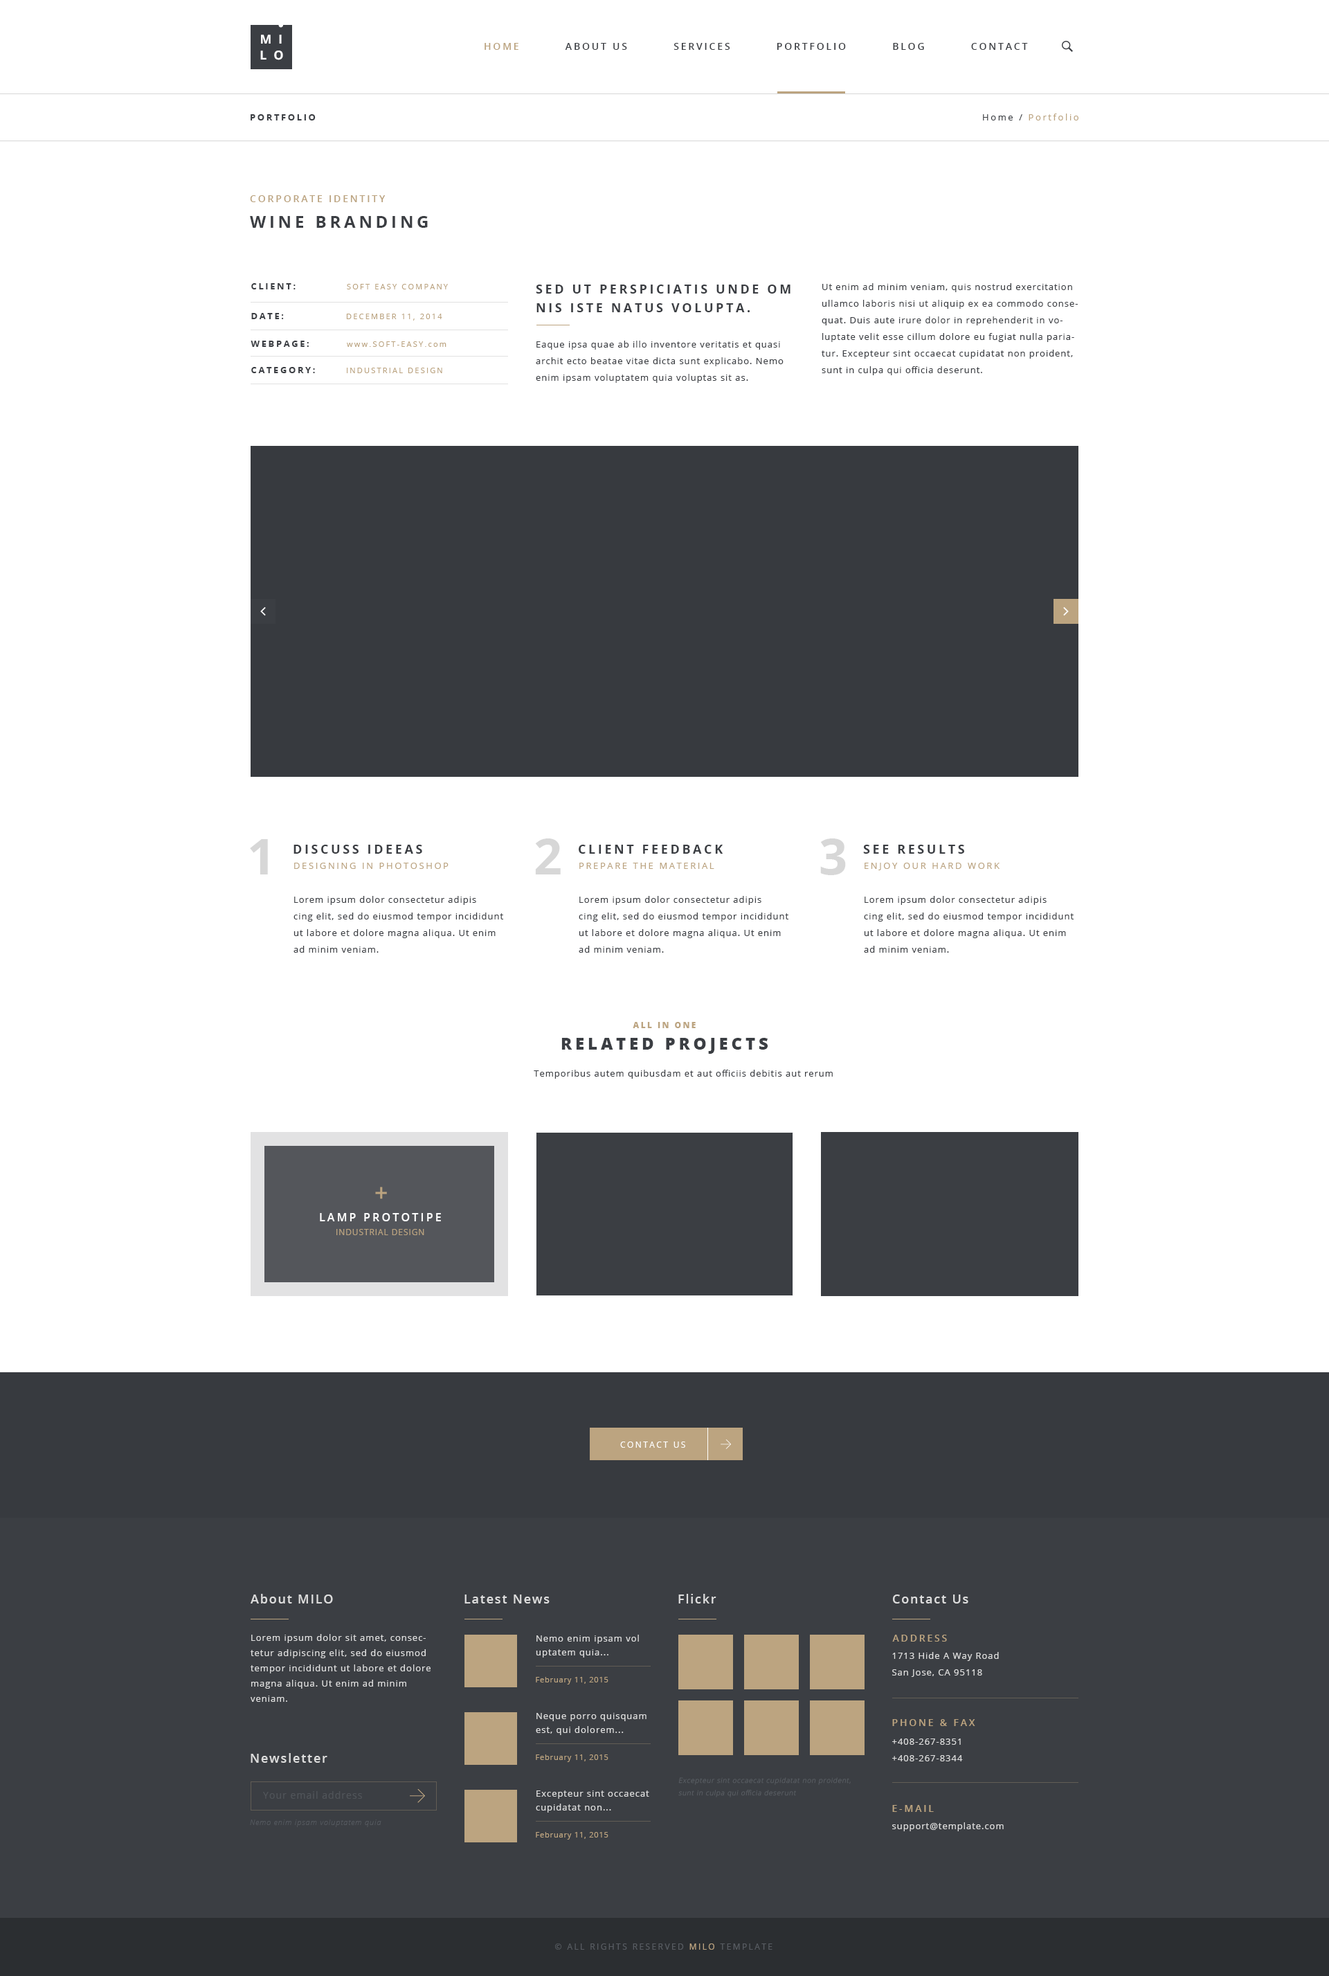
<style>
.page{position:relative;width:1329px;height:1976px;background:#ffffff}
.page>*{position:absolute;margin:0}
.t1{font:12.5px "OpenSans-Bold";letter-spacing:0.55em;color:#ffffff;text-transform:uppercase}
.t2{font:9.7px "OpenSans-Semibold";letter-spacing:0.2em;color:#3b3e43;text-transform:uppercase}
.t3{font:9.7px "OpenSans-Semibold";letter-spacing:0.2em;color:#bca480;text-transform:uppercase}
.t4{font:9px "OpenSans";letter-spacing:0.2em;color:#bca480}
.t5{font:9px "OpenSans";letter-spacing:0.2em;color:#3b3e43}
.t6{font:9px "OpenSans-Bold";letter-spacing:0.2em;color:#3b3e43;text-transform:uppercase}
.t7{font:16.6px "OpenSans-Bold";letter-spacing:0.2em;color:#3b3e43;text-transform:uppercase}
.t8{font:7.6px "OpenSans";letter-spacing:0.2em;color:#bca480;text-transform:uppercase}
.t9{font:9px/16.6px "OpenSans";letter-spacing:0.075em;color:#3b3e43}
.t10{font:12.5px/18.7px "OpenSans-Bold";letter-spacing:0.2em;color:#3b3e43;text-transform:uppercase}
.t11{font:7.6px "OpenSans";letter-spacing:0.2em;color:#bca480}
.t12{font:49.8px "OpenSans-Bold";letter-spacing:0.075em;color:#d7d7d7}
.t13{font:12.5px "OpenSans-Bold";letter-spacing:0.2em;color:#3b3e43;text-transform:uppercase}
.t14{font:9px "OpenSans";letter-spacing:0.2em;color:#bca480;text-transform:uppercase}
.t15{font:8.3px "OpenSans-Extrabold";letter-spacing:0.2em;color:#bca480;text-transform:uppercase}
.t16{font:16.6px "OpenSans-Extrabold";letter-spacing:0.2em;color:#3b3e43;text-transform:uppercase}
.t17{font:9px "OpenSans";letter-spacing:0.075em;color:#3b3e43}
.t18{font:23.7px "OpenSans-Semibold";letter-spacing:0.075em;color:#bca480;text-transform:uppercase}
.t19{font:11.1px "OpenSans-Semibold";letter-spacing:0.2em;color:#ffffff;text-transform:uppercase}
.t20{font:8.3px "OpenSans";letter-spacing:0.075em;color:#bca480;text-transform:uppercase}
.t21{font:8.3px "OpenSans";letter-spacing:0.2em;color:#ffffff;text-transform:uppercase}
.t22{font:12.5px "OpenSans-Semibold";letter-spacing:0.1em;color:#dddddd}
.t23{font:9px/15.2px "OpenSans";letter-spacing:0.075em;color:#dddddd}
.t24{font:9px/13.8px "OpenSans";letter-spacing:0.075em;color:#dddddd}
.t25{font:9px/16.6px "OpenSans";letter-spacing:0.075em;color:#dddddd}
.t26{font:7.6px "OpenSans";letter-spacing:0.075em;color:#bca480}
.t27{font:9px/16.6px "OpenSans-Semibold";letter-spacing:0.075em;color:#dddddd}
.t28{font:6.9px/12.5px "OpenSans-Light";letter-spacing:0.075em;color:#585c62;font-style:italic}
.t29{font:9.7px "OpenSans";letter-spacing:0.075em;color:#505459}
.t30{font:7.6px "OpenSansLight-Italic";letter-spacing:0.075em;color:#53575d}
.t31{font:9px "OpenSans";letter-spacing:0.075em;color:#dddddd}
.t32{font:8.3px "OpenSans";letter-spacing:0.2em;color:#585c62;text-transform:uppercase}
.t33{font:8.3px "OpenSans";letter-spacing:0.2em;color:#bca480;text-transform:uppercase}
</style>
<div class="page">
<p class="t1" style="left:261px;top:35px;width:21px;height:9px">mi</p>
<p class="t1" style="left:260px;top:51px;width:23px;height:9px">lo</p>
<p class="t2" style="left:485px;top:43px;width:543px;height:7px"><span class="t3">Home          </span>About Us          Services          Portfolio          Blog          Contact</p>
<p class="t4" style="left:983px;top:114px;width:96px;height:6px"><span class="t5">Home / </span>Portfolio</p>
<p class="t6" style="left:251px;top:114px;width:65px;height:6px">Portfolio</p>
<p class="t3" style="left:250px;top:195px;width:136px;height:7px">corporate identity</p>
<p class="t7" style="left:250px;top:216px;width:178px;height:12px">Wine branding</p>
<p class="t6" style="left:251px;top:283px;width:45px;height:6px">client:</p>
<p class="t8" style="left:347px;top:284px;width:101px;height:5px">Soft easy Company</p>
<p class="t9" style="left:536px;top:285px;width:255px;height:98px"><span class="t10">Sed ut perspiciatis unde om nis iste natus volupta.<br><br></span>Eaque ipsa quae ab illo inventore veritatis et quasi archit ecto beatae vitae dicta sunt explicabo. Nemo enim ipsam voluptatem quia voluptas sit as.</p>
<p class="t9" style="left:822px;top:283px;width:256px;height:92px">Ut enim ad minim veniam, quis nostrud exercitation ullamco laboris nisi ut aliquip ex ea commodo consequat. Duis aute irure dolor in reprehenderit in voluptate velit esse cillum dolore eu fugiat nulla pariatur. Excepteur sint occaecat cupidatat non proident, sunt in culpa qui officia deserunt.</p>
<p class="t6" style="left:251px;top:313px;width:33px;height:6px">date:</p>
<p class="t8" style="left:346px;top:314px;width:96px;height:7px">December 11, 2014</p>
<p class="t6" style="left:251px;top:341px;width:58px;height:6px">weBpage:</p>
<p class="t8" style="left:347px;top:341px;width:100px;height:6px"><span class="t11">www</span>.Soft-easy.<span class="t11">com</span></p>
<p class="t6" style="left:251px;top:367px;width:64px;height:6px">category:</p>
<p class="t8" style="left:347px;top:368px;width:95px;height:5px">Industrial design</p>
<p class="t12" style="left:250px;top:839px;width:18px;height:35px">1</p>
<p class="t13" style="left:294px;top:845px;width:128px;height:9px">Discuss ideeas</p>
<p class="t12" style="left:535px;top:838px;width:26px;height:36px">2</p>
<p class="t13" style="left:579px;top:845px;width:144px;height:9px">client feedback</p>
<p class="t12" style="left:820px;top:838px;width:26px;height:37px">3</p>
<p class="t13" style="left:863px;top:845px;width:101px;height:9px">see results</p>
<p class="t14" style="left:294px;top:863px;width:155px;height:6px">Designing in Photoshop</p>
<p class="t14" style="left:579px;top:863px;width:135px;height:6px">prepare the material</p>
<p class="t14" style="left:865px;top:863px;width:135px;height:7px">enjoy our hard work</p>
<p class="t9" style="left:294px;top:896px;width:209px;height:57px">Lorem ipsum dolor consectetur adipis<br>cing elit, sed do eiusmod tempor incididunt ut labore et dolore magna aliqua. Ut enim ad minim veniam.</p>
<p class="t9" style="left:579px;top:896px;width:210px;height:57px">Lorem ipsum dolor consectetur adipis<br>cing elit, sed do eiusmod tempor incididunt ut labore et dolore magna aliqua. Ut enim ad minim veniam.</p>
<p class="t9" style="left:864px;top:896px;width:210px;height:57px">Lorem ipsum dolor consectetur adipis<br>cing elit, sed do eiusmod tempor incididunt ut labore et dolore magna aliqua. Ut enim ad minim veniam.</p>
<p class="t15" style="left:633px;top:1022px;width:63px;height:6px">all in one</p>
<p class="t16" style="left:561px;top:1038px;width:207px;height:16px">related projects</p>
<p class="t17" style="left:534px;top:1070px;width:299px;height:9px">Temporibus autem quibusdam et aut officiis debitis aut rerum</p>
<p class="t18" style="left:375px;top:1187px;width:12px;height:12px">+</p>
<p class="t19" style="left:320px;top:1213px;width:121px;height:8px">Lamp Prototipe</p>
<p class="t20" style="left:336px;top:1229px;width:88px;height:6px">Industrial Design</p>
<p class="t21" style="left:620px;top:1441px;width:65px;height:7px">contact us</p>
<p class="t22" style="left:251px;top:1594px;width:82px;height:9px">About MILO</p>
<p class="t22" style="left:465px;top:1594px;width:85px;height:9px">Latest News</p>
<p class="t22" style="left:678px;top:1594px;width:39px;height:9px">Flickr</p>
<p class="t22" style="left:892px;top:1594px;width:77px;height:9px">Contact Us</p>
<p class="t23" style="left:251px;top:1634px;width:180px;height:68px">Lorem ipsum dolor sit amet, consectetur adipiscing elit, sed do eiusmod tempor incididunt ut labore et dolore magna aliqua. Ut enim ad minim veniam.</p>
<p class="t24" style="left:536px;top:1635px;width:103px;height:22px">Nemo enim ipsam vol uptatem quia...</p>
<p class="t3" style="left:892px;top:1635px;width:55px;height:6px">Address</p>
<p class="t25" style="left:892px;top:1652px;width:107px;height:25px">1713 Hide A Way Road<br>San Jose, CA 95118</p>
<p class="t26" style="left:536px;top:1677px;width:73px;height:7px">February 11, 2015</p>
<p class="t24" style="left:536px;top:1713px;width:111px;height:22px">Neque porro quisquam est, qui dolorem...</p>
<p class="t3" style="left:892px;top:1719px;width:83px;height:7px">Phone &amp; Fax</p>
<p class="t25" style="left:892px;top:1738px;width:71px;height:23px"><span class="t27"><br></span>+408-267-8351<br>+408-267-8344</p>
<p class="t22" style="left:251px;top:1753px;width:76px;height:10px">Newsletter</p>
<p class="t26" style="left:536px;top:1754px;width:73px;height:8px">February 11, 2015</p>
<p class="t28" style="left:678px;top:1777px;width:173px;height:20px">Excepteur sint occaecat cupidatat non proident, sunt in culpa qui officia deserunt</p>
<p class="t29" style="left:263px;top:1791px;width:99px;height:8px">Your email address</p>
<p class="t24" style="left:536px;top:1790px;width:113px;height:22px">Excepteur sint occaecat cupidatat non...</p>
<p class="t3" style="left:892px;top:1805px;width:42px;height:7px">E-mail</p>
<p class="t30" style="left:250px;top:1819px;width:131px;height:8px">Nemo enim ipsam voluptatem quia</p>
<p class="t31" style="left:892px;top:1822px;width:112px;height:9px">support@template.com</p>
<p class="t26" style="left:536px;top:1832px;width:73px;height:7px">February 11, 2015</p>
<p class="t32" style="left:555px;top:1943px;width:218px;height:7px">© All Rights Reserved <span class="t33">MILO</span> template</p>
</div>
